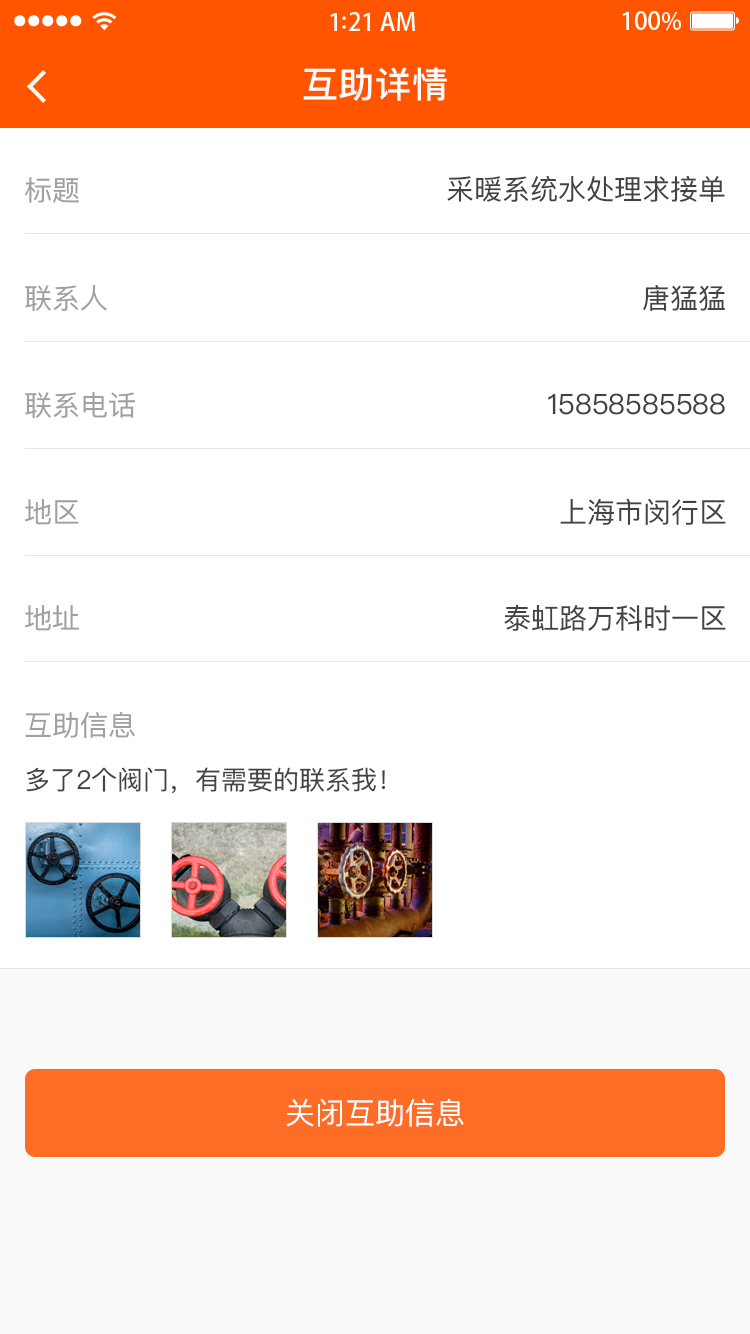
<style>
.page{position:relative;width:750px;height:1334px;background:#ffffff}
.page>*{position:absolute;margin:0}
.t1{font:36px "PingFangSC-Medium";letter-spacing:0.02em;color:#ffffff}
.t2{font:28px "PingFangSC-Regular";color:#a0a0a0}
.t3{font:28px "PingFangSC-Regular";color:#434343}
.t4{font:26px "PingFangSC-Regular";color:#434343}
.t5{font:30px "PingFangSC-Regular";color:#ffffff;text-transform:uppercase}
</style>
<div class="page">
<p class="t1" style="left:303px;top:67px;width:144px;height:34px">互助详情</p>
<p class="t2" style="left:25px;top:177px;width:54px;height:26px">标题</p>
<p class="t3" style="left:447px;top:175px;width:278px;height:27px">采暖系统水处理求接单</p>
<p class="t2" style="left:25px;top:285px;width:82px;height:27px">联系人</p>
<p class="t3" style="left:643px;top:285px;width:82px;height:26px">唐猛猛</p>
<p class="t2" style="left:25px;top:392px;width:111px;height:27px">联系电话</p>
<p class="t3" style="left:548px;top:393px;width:177px;height:22px">15858585588</p>
<p class="t2" style="left:25px;top:499px;width:54px;height:26px">地区</p>
<p class="t3" style="left:560px;top:498px;width:166px;height:27px">上海市闵行区</p>
<p class="t2" style="left:25px;top:605px;width:54px;height:26px">地址</p>
<p class="t3" style="left:504px;top:604px;width:222px;height:27px">泰虹路万科时一区</p>
<p class="t2" style="left:25px;top:712px;width:110px;height:26px">互助信息</p>
<p class="t4" style="left:26px;top:767px;width:360px;height:27px">多了2个阀门，有需要的联系我！</p>
<p class="t5" style="left:286px;top:1098px;width:178px;height:29px">关闭互助信息</p>
</div>
